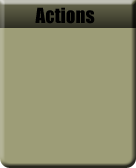
<style>
.page{position:relative;width:136px;height:168px;background:#9d9d77}
.page>*{position:absolute;margin:0}
.t1{font:19.2px "Impact";color:#000000}
</style>
<div class="page">
<p class="t1" style="left:35px;top:7px;width:60px;height:17px">Actions</p>
</div>
